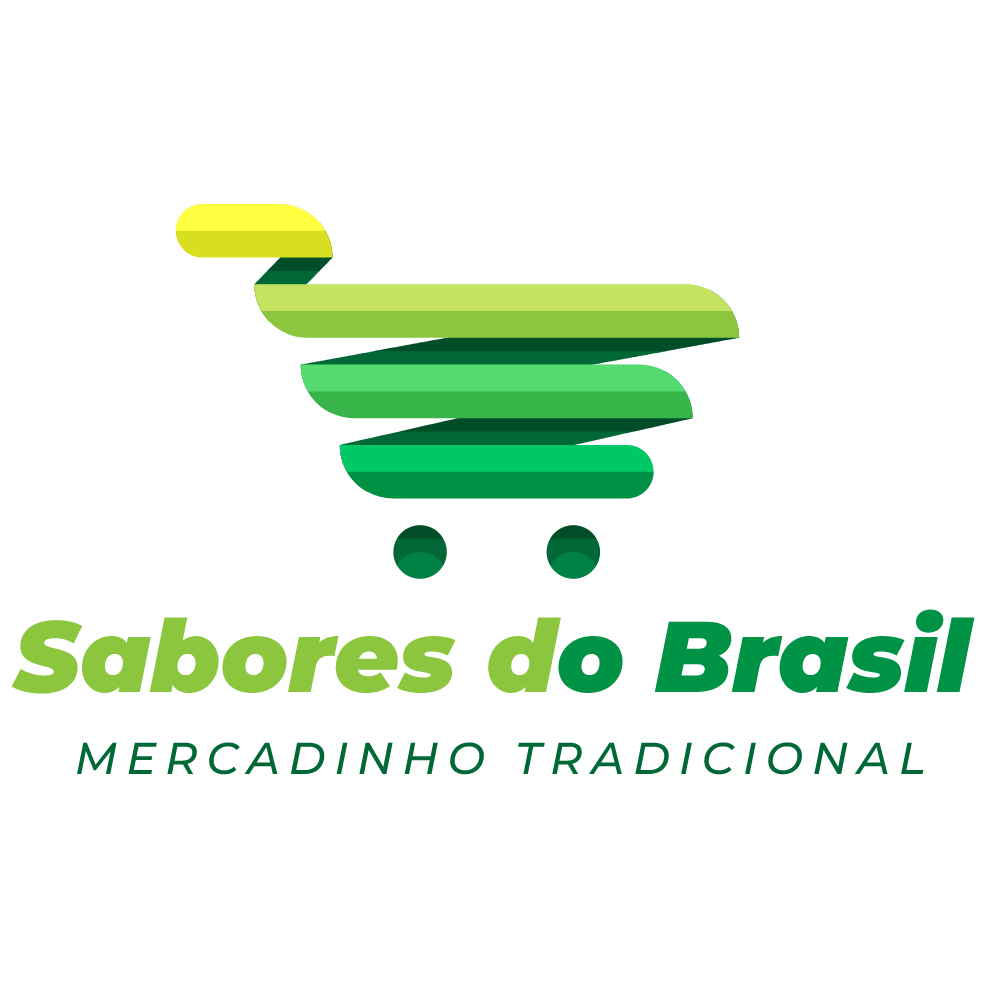
<style>
.page{position:relative;width:1000px;height:1000px;background:#ffffff}
.page>*{position:absolute;margin:0}
.t1{font:100.5px "Montserrat-BlackItalic";color:#8cc63f}
.t2{font:100.5px "Montserrat-BlackItalic";color:#009245}
.t3{font:44.6px "Montserrat-MediumItalic";letter-spacing:0.2em;color:#006837}
</style>
<div class="page">
<p class="t1" style="left:11px;top:609px;width:964px;height:85px">Sabores d<span class="t2">o Brasil</span></p>
<p class="t3" style="left:77px;top:742px;width:847px;height:33px">MERCADINHO TRADICIONAL</p>
</div>
